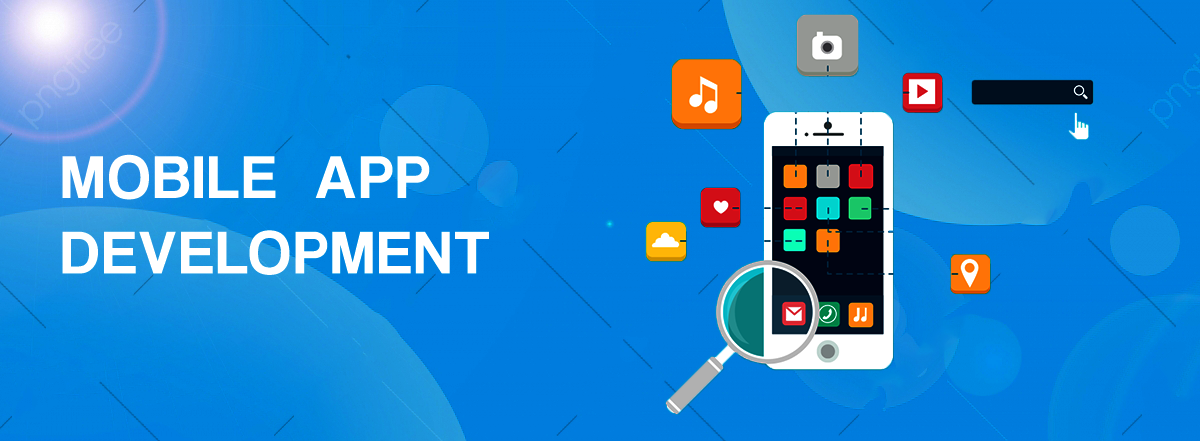
<style>
.page{position:relative;width:1200px;height:441px;background:#007cde}
.page>*{position:absolute;margin:0}
.t1{font:63px "CoolveticaRg-Regular";letter-spacing:0.05em;color:#ffffff;text-transform:uppercase}
</style>
<div class="page">
<p class="t1" style="left:62px;top:154px;width:427px;height:121px">Mobile  App<br>Development</p>
</div>
